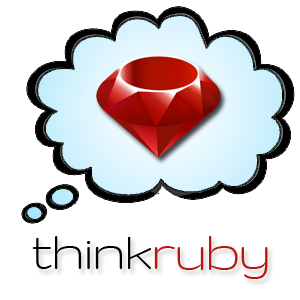
<style>
.page{position:relative;width:300px;height:300px;background:#ffffff}
.page>*{position:absolute;margin:0}
.t1{font:60px "Gruppo";color:#000000}
.t2{font:60px "Gruppo";color:#b8160d}
</style>
<div class="page">
<p class="t1" style="left:32px;top:236px;width:236px;height:43px">think<span class="t2">ruby</span></p>
</div>
